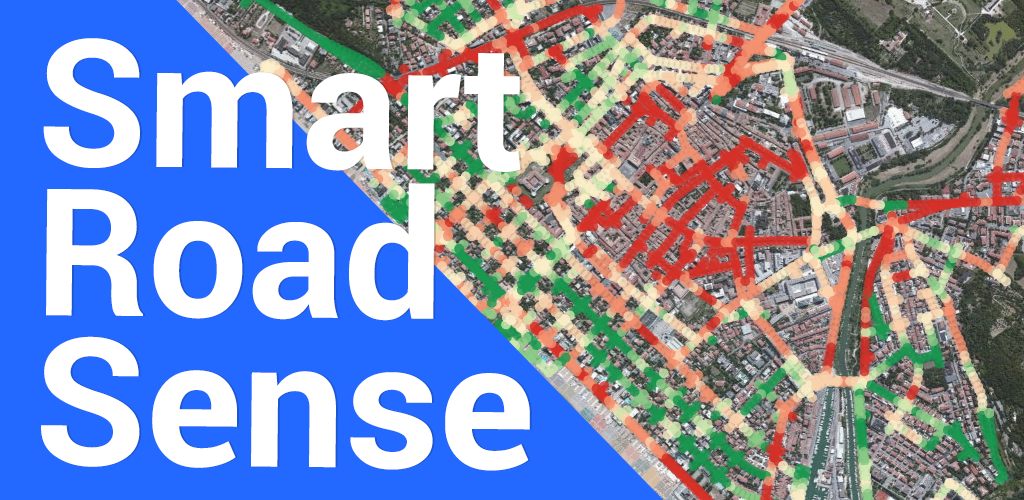
<style>
.page{position:relative;width:1024px;height:500px;background:#2469ff}
.page>*{position:absolute;margin:0}
.t1{font:177.3px/149.3px "Roboto-Bold";color:#ffffff}
.t2{font:177.3px/149.3px "Roboto-Bold";color:#ffffff;scale:1.03 1}
</style>
<div class="page">
<p class="t1" style="left:41px;top:38px;width:489px;height:433px;rotate:1deg">Smart<br>Road<br><span class="t2">Sense</span></p>
<p class="t1" style="left:43px;top:38px;width:489px;height:433px;rotate:1deg">Smart<br>Road<br><span class="t2">Sense</span></p>
</div>
